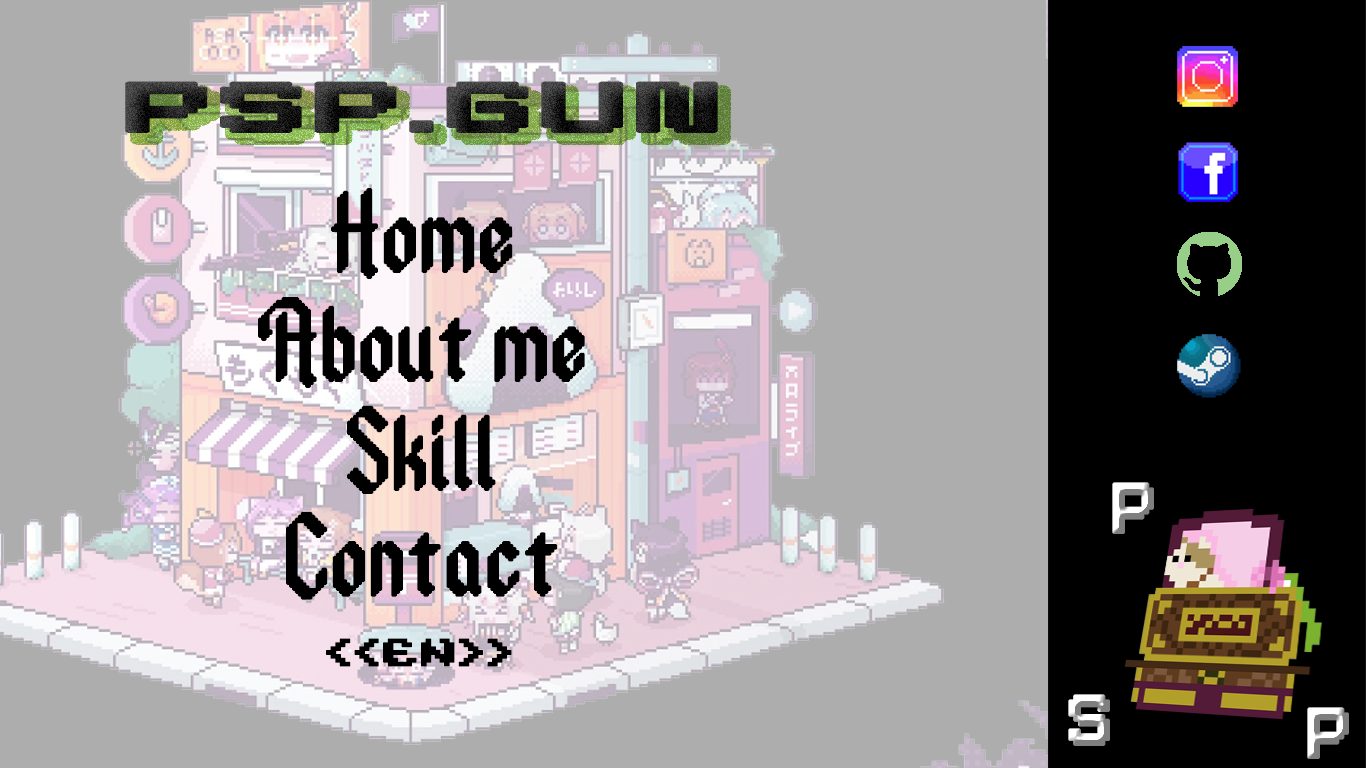
<style>
.page{position:relative;width:1366px;height:768px;background:#adadad}
.page>*{position:absolute;margin:0}
.t1{font:97px "Pixeboy";font-weight:bold;scale:1.97 1}
.t2{font:97px "Ancient-Modern-Tales";color:#000000;font-weight:bold}
.t3{font:97px "Pixeboy";font-weight:bold}
.t4{font:27.2px "Wayfarer's-Toy-Box";color:#000000;font-weight:bold;scale:1.19 1}
</style>
<div class="page">
<p class="t1" style="left:125px;top:81px;width:593px;height:52px">PSP.GUN</p>
<p class="t2" style="left:331px;top:188px;width:182px;height:91px">Home</p>
<p class="t2" style="left:258px;top:297px;width:327px;height:91px">About me</p>
<p class="t2" style="left:347px;top:405px;width:149px;height:89px">Skill</p>
<p class="t3" style="left:1112px;top:482px;width:42px;height:52px">P</p>
<p class="t2" style="left:286px;top:511px;width:272px;height:89px">Contact</p>
<p class="t4" style="left:326px;top:638px;width:186px;height:29px">&lt;&lt;EN&gt;&gt;</p>
<p class="t3" style="left:1068px;top:694px;width:42px;height:52px">s</p>
<p class="t3" style="left:1307px;top:707px;width:42px;height:52px">P</p>
</div>
